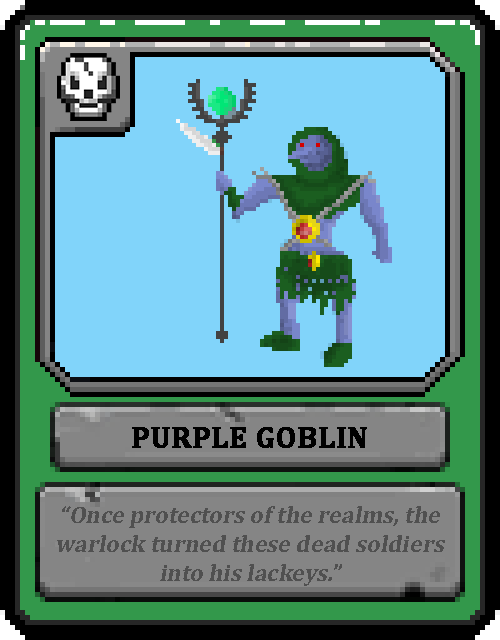
<style>
.page{position:relative;width:500px;height:640px;background:#81d4fa}
.page>*{position:absolute;margin:0}
.t1{font:30px "Cambria-Bold";color:#000000;text-transform:uppercase;font-weight:bold}
.t2{font:24px "Cambria-Bold";color:#505050;font-style:italic}
</style>
<div class="page">
<p class="t1" style="left:132px;top:427px;width:235px;height:21px">Purple Goblin</p>
<p class="t2" style="left:57px;top:506px;width:388px;height:80px;text-align:center">“Once protectors of the realms, the warlock turned these dead soldiers into his lackeys.”</p>
</div>
